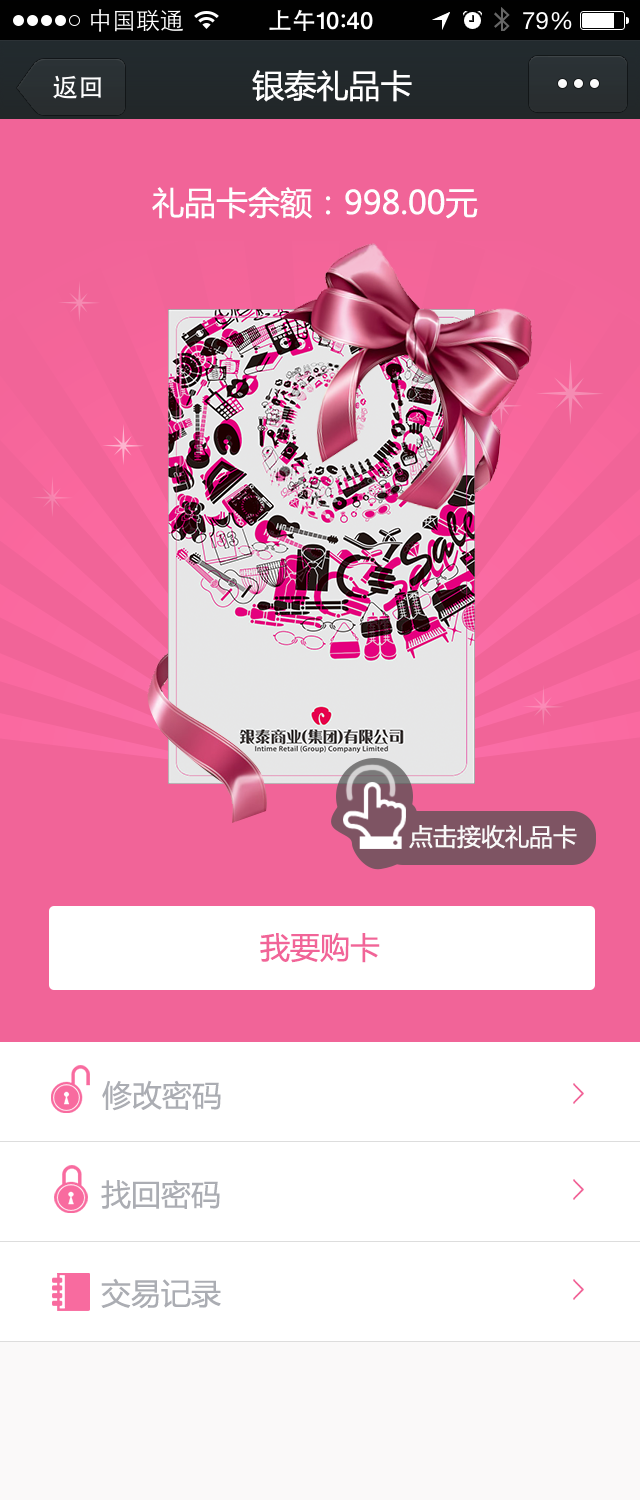
<style>
.page{position:relative;width:640px;height:1500px;background:#f16498}
.page>*{position:absolute;margin:0}
.t1{font:32px "MicrosoftYaHei";color:#ffffff}
.t2{font:32px "MicrosoftYaHei";color:#fefeff}
.t3{font:24px "MicrosoftYaHei";color:#faf9f9}
.t4{font:30px "MicrosoftYaHei";color:#f16498}
.t5{font:30px "MicrosoftYaHei";color:#abadb3}
</style>
<div class="page">
<p class="t1" style="left:252px;top:70px;width:160px;height:32px">银泰礼品卡</p>
<p class="t2" style="left:152px;top:187px;width:326px;height:32px">礼品卡余额：998.00元</p>
<p class="t3" style="left:409px;top:825px;width:168px;height:24px">点击接收礼品卡</p>
<p class="t4" style="left:260px;top:933px;width:120px;height:30px">我要购卡</p>
<p class="t5" style="left:102px;top:1080px;width:119px;height:31px">修改密码</p>
<p class="t5" style="left:101px;top:1179px;width:119px;height:30px">找回密码</p>
<p class="t5" style="left:101px;top:1278px;width:120px;height:31px">交易记录</p>
</div>
